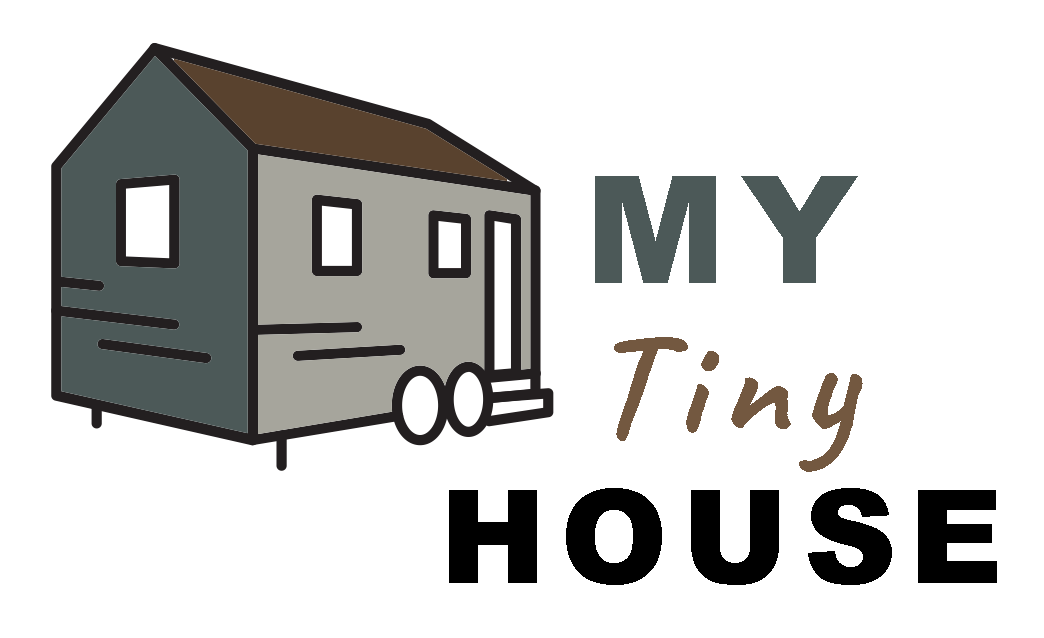
<style>
.page{position:relative;width:1044px;height:638px;background:#ffffff}
.page>*{position:absolute;margin:0}
.t1{font:130px/150px "Arial-Black";letter-spacing:0.1em;color:#000000}
.t2{font:150px/150px "Arial-Black";letter-spacing:0.1em;color:#4c5958}
.t3{font:150px/150px "Caveat-Bold";letter-spacing:0.1em;color:#735840}
</style>
<div class="page">
<p class="t1" style="left:449px;top:176px;width:548px;height:409px;text-align:center"><span class="t2">MY<br></span><span class="t3">Tiny<br></span>HOUSE</p>
</div>
